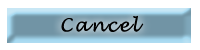
<style>
.page{position:relative;width:200px;height:50px;background:#ffffff}
.page>*{position:absolute;margin:0}
.t1{font:18px "LucidaHandwriting-Italic";letter-spacing:0.1em;color:#000000}
</style>
<div class="page">
<p class="t1" style="left:61px;top:15px;width:83px;height:17px">Cancel</p>
</div>
